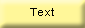
<style>
.page{position:relative;width:85px;height:28px;background:#fff799}
.page>*{position:absolute;margin:0}
.t1{font:11px "Dotum";color:#000000}
</style>
<div class="page">
<p class="t1" style="left:30px;top:8px;width:24px;height:8px">Text</p>
</div>
